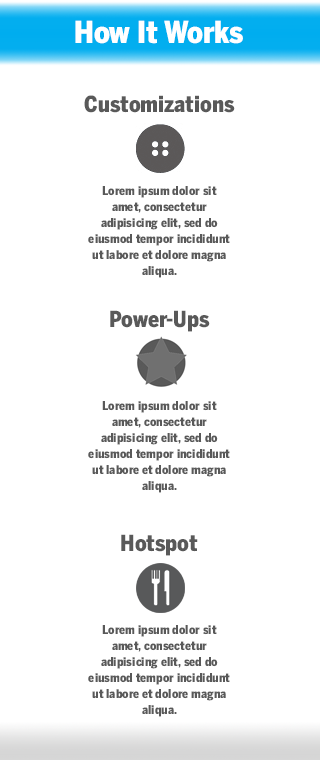
<style>
.page{position:relative;width:320px;height:760px;background:#ffffff}
.page>*{position:absolute;margin:0}
.t1{font:30px "BentonSansCond-Black";color:#ffffff}
.t2{font:22px "BentonSansCond-Black";color:#595959}
.t3{font:12px/16px "BentonSansCond-Black";color:#595959}
</style>
<div class="page">
<p class="t1" style="left:75px;top:20px;width:168px;height:24px">How It Works</p>
<p class="t2" style="left:84px;top:95px;width:151px;height:18px">Customizations</p>
<p class="t3" style="left:88px;top:186px;width:142px;height:92px;text-align:center">Lorem ipsum dolor sit amet, consectetur <br>adipisicing elit, sed do eiusmod tempor incididunt ut labore et dolore magna aliqua.</p>
<p class="t2" style="left:110px;top:310px;width:100px;height:22px">Power-Ups</p>
<p class="t3" style="left:88px;top:401px;width:142px;height:92px;text-align:center">Lorem ipsum dolor sit amet, consectetur <br>adipisicing elit, sed do eiusmod tempor incididunt ut labore et dolore magna aliqua.</p>
<p class="t2" style="left:121px;top:534px;width:77px;height:22px">Hotspot</p>
<p class="t3" style="left:88px;top:625px;width:142px;height:92px;text-align:center">Lorem ipsum dolor sit amet, consectetur <br>adipisicing elit, sed do eiusmod tempor incididunt ut labore et dolore magna aliqua.</p>
</div>
